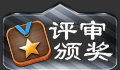
<style>
.page{position:relative;width:120px;height:70px;background:#333333}
.page>*{position:absolute;margin:0}
.t1{font:30px "LiSu";color:#ffffff}
</style>
<div class="page">
<p class="t1" style="left:48px;top:20px;width:58px;height:20px">评审</p>
<p class="t1" style="left:54px;top:41px;width:59px;height:20px">颁奖</p>
</div>
